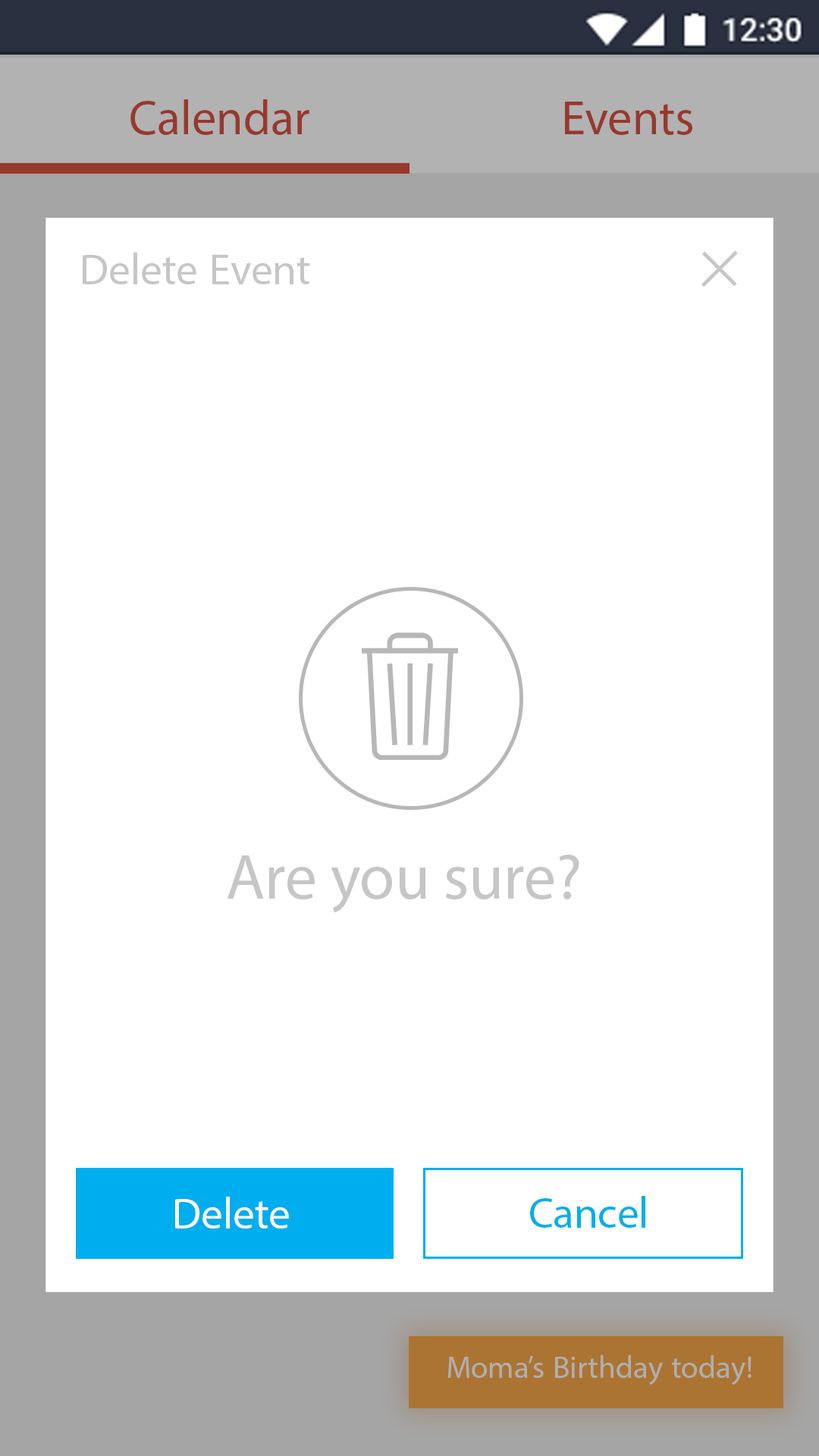
<style>
.page{position:relative;width:819px;height:1456px;background:#ffffff}
.page>*{position:absolute;margin:0}
.t1{font:68.2px "MyriadArabic-Regular";color:#97392d}
.t2{font:60.7px "MyriadArabic-Regular";color:#c6c6c6}
.t3{font:111.5px "BaskOldFace";color:#c6c6c6}
.t4{font:63.7px "MyriadPro-Regular";color:#c6c6c6}
.t5{font:60.7px "MyriadArabic-Regular";color:#fffafa}
.t6{font:60.7px "MyriadArabic-Regular";color:#00aeef}
.t7{font:43.8px "MyriadArabic-Regular";color:#afafaf}
</style>
<div class="page">
<p class="t1" style="left:130px;top:99px;width:179px;height:36px">Calendar</p>
<p class="t1" style="left:565px;top:102px;width:127px;height:33px">Events</p>
<p class="t2" style="left:83px;top:253px;width:227px;height:31px">Delete Event</p>
<p class="t3" style="left:701px;top:250px;width:37px;height:37px;rotate:-45deg">+</p>
<p class="t4" style="left:227px;top:855px;width:352px;height:58px">Are you sure?</p>
<p class="t5" style="left:175px;top:1197px;width:114px;height:31px">Delete</p>
<p class="t6" style="left:530px;top:1196px;width:115px;height:32px">Cancel</p>
<p class="t7" style="left:447px;top:1355px;width:304px;height:30px">Moma’s Birthday today!</p>
</div>
